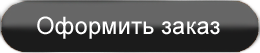
<style>
.page{position:relative;width:260px;height:53px;background:#1b1b1b}
.page>*{position:absolute;margin:0}
.t1{font:24px "ArialMT";color:#ffffff}
</style>
<div class="page">
<p class="t1" style="left:37px;top:16px;width:183px;height:23px">Оформить заказ</p>
</div>
